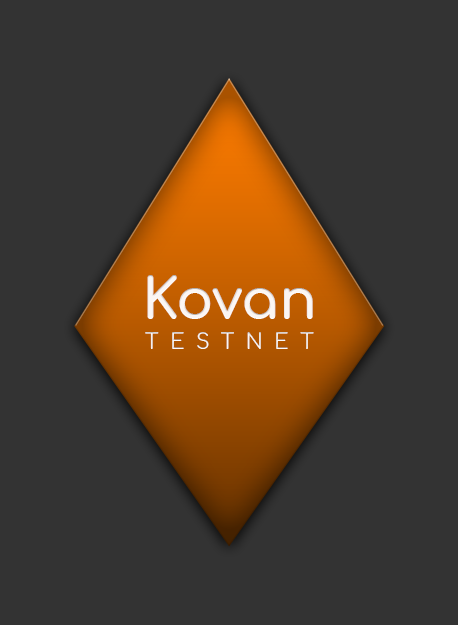
<style>
.page{position:relative;width:458px;height:625px;background:#333333}
.page>*{position:absolute;margin:0}
.t1{font:20.7px/31px "Comfortaa-Regular";letter-spacing:0.56em;color:#ffffff}
.t2{font:55.8px "Comfortaa-Bold";color:#ffffff}
</style>
<div class="page">
<p class="t1" style="left:145px;top:275px;width:169px;height:74px;text-align:center"><span class="t2">Kovan<br></span>TESTNET</p>
</div>
